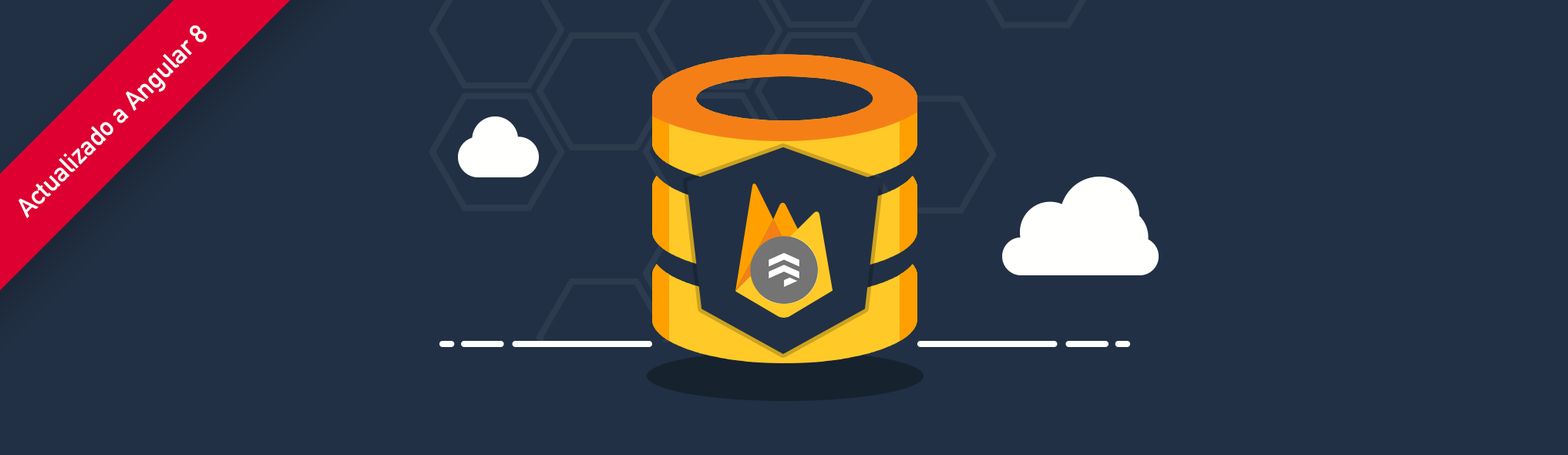
<style>
.page{position:relative;width:1568px;height:455px;background:#213044}
.page>*{position:absolute;margin:0}
.t1{font:26.1px "DINAlternate-Bold";color:#ffffff}
</style>
<div class="page">
<p class="t1" style="left:19px;top:25px;width:188px;height:193px;rotate:-45deg">Actualizado a Angular 8</p>
</div>
